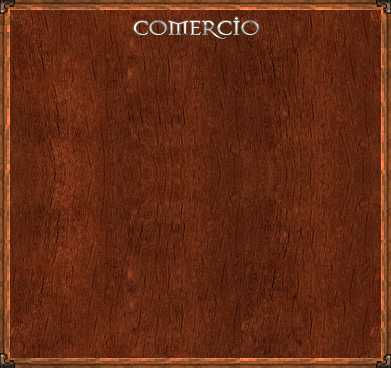
<style>
.page{position:relative;width:391px;height:368px}
.page>*{position:absolute;margin:0}
.t1{font:22px "Mason-Regular";letter-spacing:-0.06em;scale:1.07 1}
</style>
<div class="page">
<p class="t1" style="left:133px;top:17px;width:126px;height:22px">COMERCIO</p>
</div>
